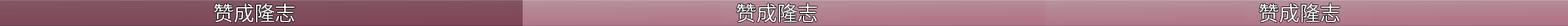
<style>
.page{position:relative;width:1568px;height:26px}
.page>*{position:absolute;margin:0}
.t1{font:20.6px "SourceHanSansSC-Normal";color:#ffffff}
</style>
<div class="page">
<p class="t1" style="left:214px;top:3px;width:81px;height:20px">赞成隆志</p>
<p class="t1" style="left:736px;top:3px;width:81px;height:20px">赞成隆志</p>
<p class="t1" style="left:1259px;top:3px;width:81px;height:20px">赞成隆志</p>
</div>
